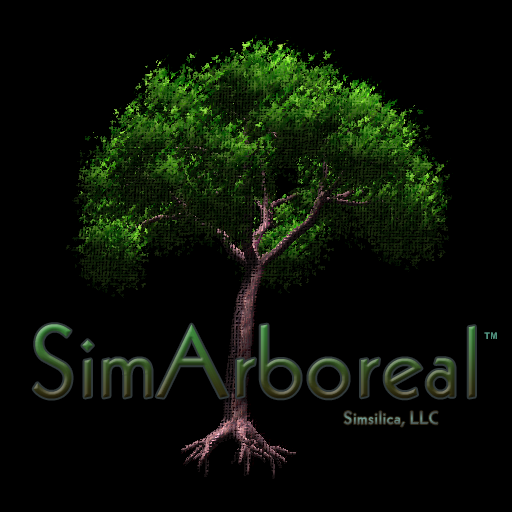
<style>
.page{position:relative;width:512px;height:512px;background:#000000}
.page>*{position:absolute;margin:0}
.t1{font:101px "K791Geometrical";letter-spacing:0.05em}
.t2{font:9px "Arial-BoldMT";letter-spacing:0.05em;color:#4f907d}
.t3{font:18px "K791GeometricalBold";letter-spacing:0.05em}
</style>
<div class="page">
<p class="t1" style="left:33px;top:324px;width:442px;height:75px">SimArboreal</p>
<p class="t2" style="left:484px;top:332px;width:13px;height:7px">TM</p>
<p class="t3" style="left:344px;top:411px;width:94px;height:16px">Simsilica, LLC</p>
</div>
